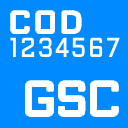
<style>
.page{position:relative;width:128px;height:128px;background:#008aff}
.page>*{position:absolute;margin:0}
.t1{font:31px "Aldrich-Regular";letter-spacing:0.096em;color:#ffffff;font-weight:bold;scale:0.93 1}
.t2{font:27.5px "Aldrich-Regular";letter-spacing:0.097em;color:#ffffff;font-weight:bold;scale:0.8 1}
.t3{font:49.5px "Aldrich-Regular";letter-spacing:-0.046em;color:#ffffff;font-weight:bold;scale:0.91 1}
</style>
<div class="page">
<p class="t1" style="left:11px;top:11px;width:70px;height:22px">COD</p>
<p class="t2" style="left:10px;top:37px;width:110px;height:20px">1234567</p>
<p class="t3" style="left:25px;top:81px;width:93px;height:36px">GSC</p>
</div>
